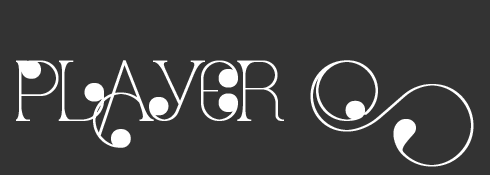
<style>
.page{position:relative;width:490px;height:175px;background:#333333}
.page>*{position:absolute;margin:0}
.t1{font:70px "PortVintage-DcrMed";letter-spacing:0.01em;color:#ffffff;text-transform:uppercase;font-weight:bold}
.t2{font:70px "PortVintage-DcrMed";letter-spacing:0.01em;color:#ffffff;font-weight:bold}
</style>
<div class="page">
<p class="t1" style="left:16px;top:60px;width:458px;height:107px">Player <span class="t2">O</span></p>
</div>
